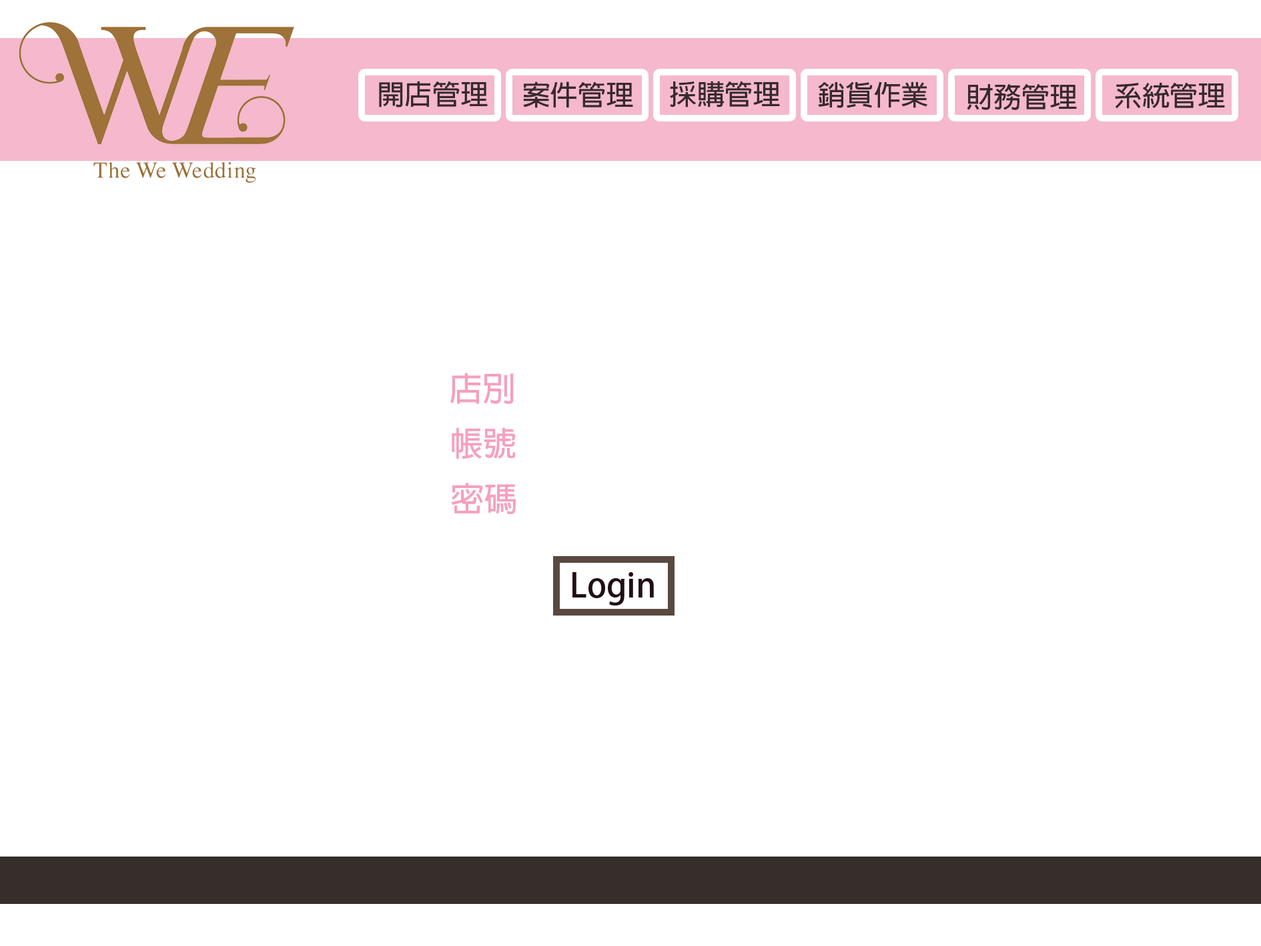
<style>
.page{position:relative;width:1261px;height:946px;background:#ffffff}
.page>*{position:absolute;margin:0}
.t1{font:27.8px "AdobeFanHeitiStd-Bold";color:#362a2e}
.t2{font:8px "AdobeFanHeitiStd-Bold";color:#f6a0bc}
</style>
<div class="page">
<p class="t1" style="left:379px;top:81px;width:109px;height:26px">開店管理</p>
<p class="t1" style="left:523px;top:81px;width:110px;height:27px">案件管理</p>
<p class="t1" style="left:670px;top:81px;width:110px;height:26px">採購管理</p>
<p class="t1" style="left:818px;top:81px;width:110px;height:27px">銷貨作業</p>
<p class="t1" style="left:967px;top:83px;width:110px;height:27px">財務管理</p>
<p class="t1" style="left:1115px;top:82px;width:110px;height:27px">系統管理</p>
<p class="t2" style="left:450px;top:373px;width:64px;height:31px">店別</p>
<p class="t2" style="left:452px;top:427px;width:64px;height:32px">帳號</p>
<p class="t2" style="left:451px;top:482px;width:65px;height:32px">密碼</p>
</div>
